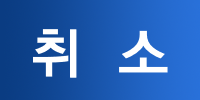
<style>
.page{position:relative;width:200px;height:100px}
.page>*{position:absolute;margin:0}
.t1{font:55px "YDIYGO340";letter-spacing:-0.006em;color:#ffffff}
</style>
<div class="page">
<p class="t1" style="left:33px;top:29px;width:135px;height:49px">취  소</p>
</div>
